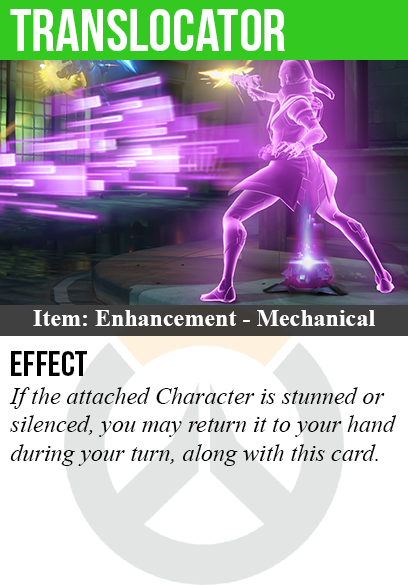
<style>
.page{position:relative;width:408px;height:585px;background:#ffffff}
.page>*{position:absolute;margin:0}
.t1{font:60px "BebasNeue";color:#ffffff}
.t2{font:24px "TimesNewRomanPS-BoldMT";color:#ffffff}
.t3{font:36px "BebasNeue";color:#000000}
.t4{font:24px "TimesNewRomanPS-ItalicMT";color:#000000}
</style>
<div class="page">
<p class="t1" style="left:10px;top:9px;width:275px;height:42px">translocator</p>
<p class="t2" style="left:33px;top:310px;width:342px;height:16px">Item: Enhancement - Mechanical</p>
<p class="t3" style="left:11px;top:351px;width:76px;height:25px">Effect</p>
<p class="t4" style="left:9px;top:387px;width:388px;height:79px">If the attached Character is stunned or<br>silenced, you may return it to your hand<br>during your turn, along with this card.</p>
</div>
